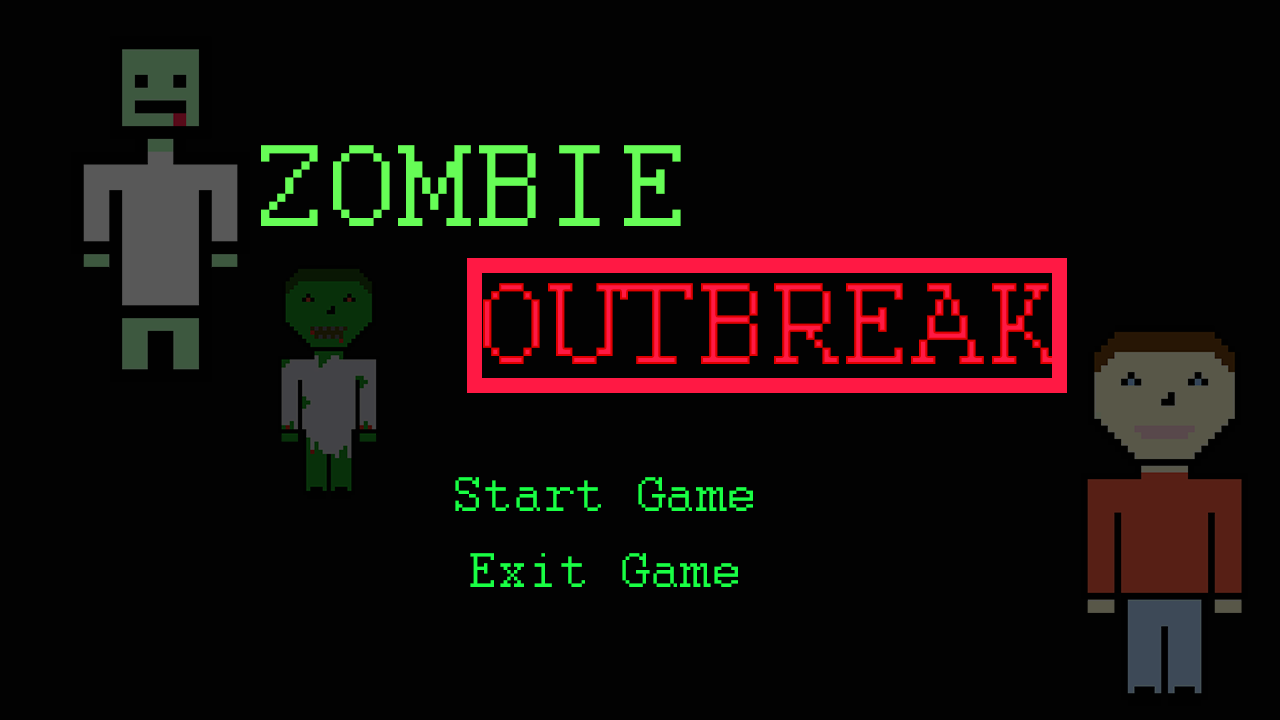
<style>
.page{position:relative;width:1280px;height:720px;background:#020202}
.page>*{position:absolute;margin:0}
.t1{font:129.2px "Courier";color:#66fd56}
.t2{font:129.2px "Courier"}
.t3{font:54.2px "Courier";color:#19ff44}
</style>
<div class="page">
<p class="t1" style="left:261px;top:145px;width:420px;height:81px">ZOMBIE</p>
<p class="t2" style="left:483px;top:283px;width:574px;height:81px">OUTBREAK</p>
<p class="t3" style="left:455px;top:477px;width:298px;height:34px">Start Game</p>
<p class="t3" style="left:470px;top:553px;width:268px;height:34px">Exit Game</p>
</div>
